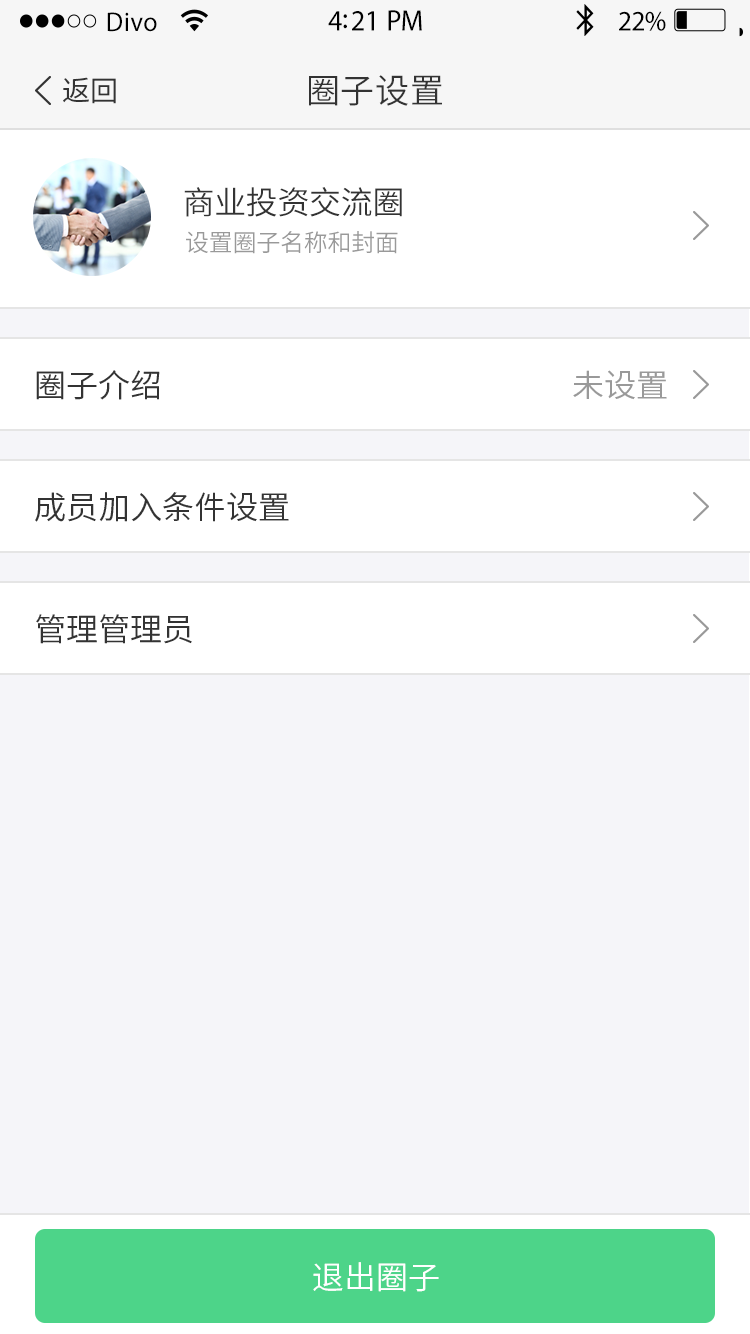
<style>
.page{position:relative;width:750px;height:1334px;background:#f5f5f9}
.page>*{position:absolute;margin:0}
.t1{font:27.3px "MyriadPro-Regular";letter-spacing:0.02em;color:#000000;scale:0.96 1}
.t2{font:29.6px "MyriadPro-Regular";letter-spacing:-0.02em;color:#000000;scale:0.96 1}
.t3{font:28.4px "MyriadPro-Regular";letter-spacing:-0.02em;color:#000000;scale:0.96 1}
.t4{font:28px "SourceHanSansCN-Normal";color:#333333}
.t5{font:34px "SourceHanSansCN-Normal";letter-spacing:0.02em;color:#333333}
.t6{font:32px "SourceHanSansCN-Normal";letter-spacing:-0.01em;color:#333333}
.t7{font:24px "SourceHanSansCN-Normal";letter-spacing:-0.01em;color:#999999}
.t8{font:32px "SourceHanSansCN-Normal";color:#333333}
.t9{font:32px "SourceHanSansCN-Normal";color:#999999}
.t10{font:32px "SourceHanSansCN-Normal";color:#ffffff}
</style>
<div class="page">
<p class="t1" style="left:107px;top:12px;width:50px;height:20px">Divo</p>
<p class="t2" style="left:328px;top:10px;width:94px;height:21px">4:21 PM</p>
<p class="t3" style="left:619px;top:11px;width:47px;height:20px">22%</p>
<p class="t4" style="left:63px;top:77px;width:53px;height:27px">返回</p>
<p class="t5" style="left:309px;top:75px;width:133px;height:31px">圈子设置</p>
<p class="t6" style="left:184px;top:187px;width:218px;height:30px">商业投资交流圈</p>
<p class="t7" style="left:186px;top:231px;width:212px;height:23px">设置圈子名称和封面</p>
<p class="t8" style="left:36px;top:370px;width:124px;height:30px">圈子介绍</p>
<p class="t9" style="left:573px;top:370px;width:94px;height:30px">未设置</p>
<p class="t8" style="left:35px;top:492px;width:254px;height:30px">成员加入条件设置</p>
<p class="t8" style="left:36px;top:614px;width:156px;height:30px">管理管理员</p>
<p class="t10" style="left:313px;top:1262px;width:126px;height:30px">退出圈子</p>
</div>
